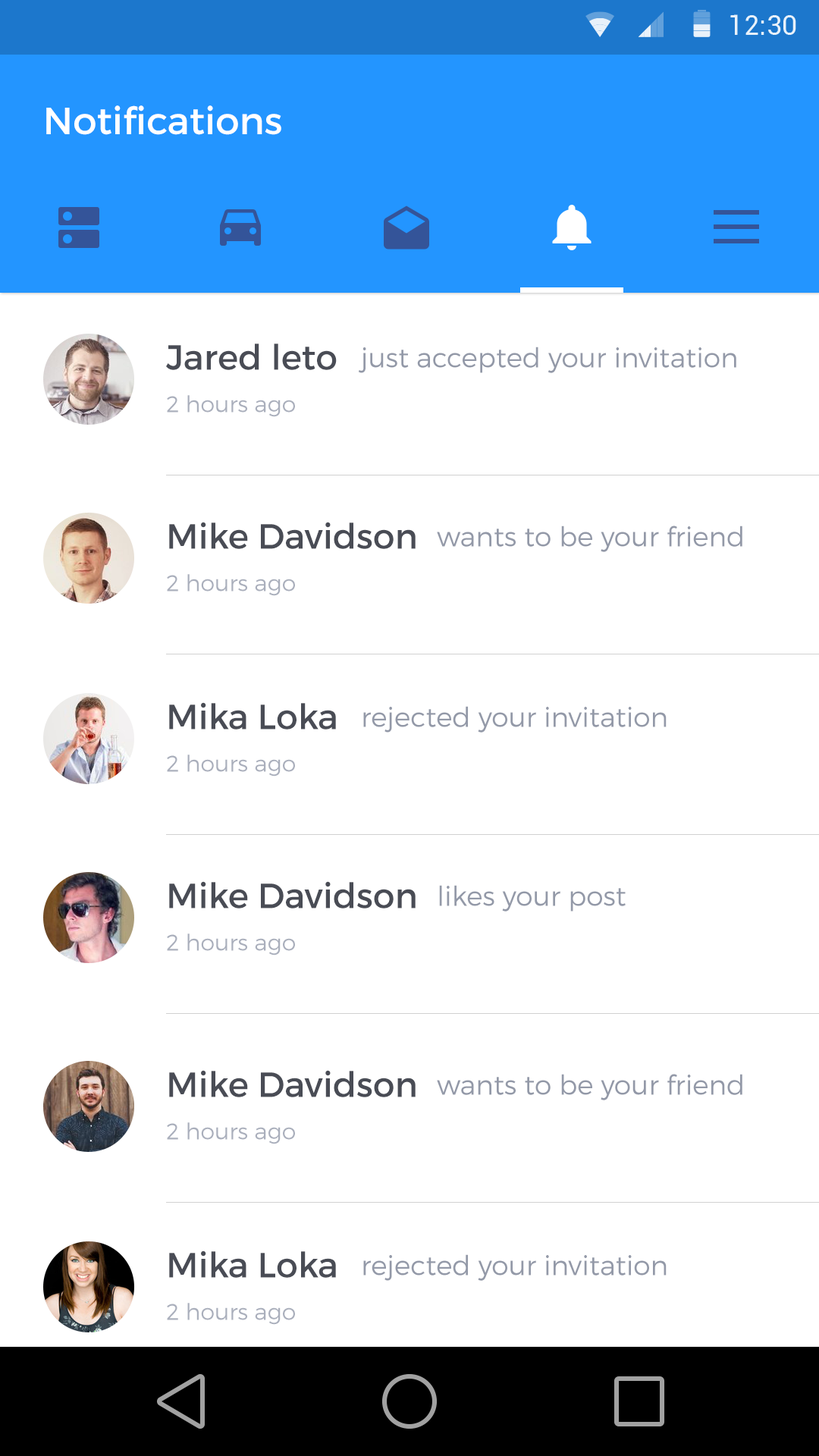
<style>
.page{position:relative;width:819px;height:1456px;background:#ffffff}
.page>*{position:absolute;margin:0}
.t1{font:37.9px "Montserrat-Regular";color:#ffffff}
.t2{font:34.9px "Montserrat-Regular";color:#494c55}
.t3{font:27.3px "Montserrat-Light";color:#9399a8}
.t4{font:22.7px "Montserrat-Light";color:#aaafbc}
</style>
<div class="page">
<p class="t1" style="left:46px;top:105px;width:235px;height:30px">Notifications</p>
<p class="t2" style="left:166px;top:344px;width:171px;height:26px">Jared leto</p>
<p class="t3" style="left:358px;top:347px;width:378px;height:26px">just accepted your invitation</p>
<p class="t4" style="left:167px;top:395px;width:128px;height:22px">2 hours ago</p>
<p class="t2" style="left:169px;top:522px;width:247px;height:27px">Mike Davidson</p>
<p class="t3" style="left:437px;top:526px;width:305px;height:26px">wants to be your friend</p>
<p class="t4" style="left:167px;top:574px;width:128px;height:22px">2 hours ago</p>
<p class="t2" style="left:169px;top:702px;width:167px;height:28px">Mika Loka</p>
<p class="t3" style="left:363px;top:706px;width:304px;height:27px">rejected your invitation</p>
<p class="t4" style="left:167px;top:755px;width:128px;height:22px">2 hours ago</p>
<p class="t2" style="left:169px;top:881px;width:247px;height:27px">Mike Davidson</p>
<p class="t3" style="left:439px;top:885px;width:187px;height:27px">likes your post</p>
<p class="t4" style="left:167px;top:933px;width:128px;height:22px">2 hours ago</p>
<p class="t2" style="left:169px;top:1070px;width:247px;height:27px">Mike Davidson</p>
<p class="t3" style="left:437px;top:1074px;width:305px;height:26px">wants to be your friend</p>
<p class="t4" style="left:167px;top:1122px;width:128px;height:22px">2 hours ago</p>
<p class="t2" style="left:169px;top:1250px;width:167px;height:28px">Mika Loka</p>
<p class="t3" style="left:363px;top:1254px;width:304px;height:27px">rejected your invitation</p>
<p class="t4" style="left:167px;top:1303px;width:128px;height:22px">2 hours ago</p>
</div>
